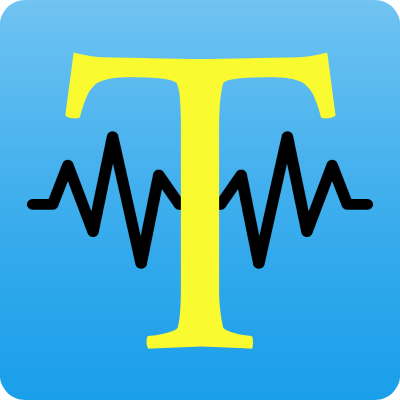
<style>
.page{position:relative;width:400px;height:400px}
.page>*{position:absolute;margin:0}
.t1{font:450px "CrimsonText-Regular";color:#fafa30}
</style>
<div class="page">
<p class="t1" style="left:65px;top:52px;width:271px;height:297px">T</p>
</div>
